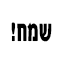
<style>
.page{position:relative;width:64px;height:64px;background:#ffffff}
.page>*{position:absolute;margin:0}
.t1{font:36.1px "FbAlbatros-Black";color:#000000;scale:0.53 1}
</style>
<div class="page">
<p class="t1" style="left:11px;top:22px;width:41px;height:20px">שמח!</p>
</div>
